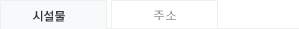
<style>
.page{position:relative;width:299px;height:29px;background:#ffffff}
.page>*{position:absolute;margin:0}
.t1{font:12px "YGO540";color:#353637}
.t2{font:12px "Gulim"}
</style>
<div class="page">
<p class="t1" style="left:33px;top:10px;width:32px;height:12px">시설물</p>
<p class="t2" style="left:154px;top:10px;width:22px;height:11px">주소</p>
</div>
